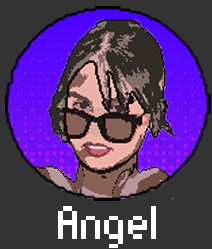
<style>
.page{position:relative;width:212px;height:249px;background:#333333}
.page>*{position:absolute;margin:0}
.t1{font:48px "Munro";color:#ffffff}
</style>
<div class="page">
<p class="t1" style="left:58px;top:206px;width:98px;height:42px">Angel</p>
</div>
